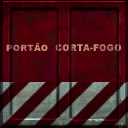
<style>
.page{position:relative;width:128px;height:128px}
.page>*{position:absolute;margin:0}
.t1{font:8.8px "Arial-Black";letter-spacing:0.05em;color:#b8826c;scale:0.97 1}
.t2{font:9.2px "Arial-Black";letter-spacing:0.05em;text-transform:uppercase;scale:0.93 1}
</style>
<div class="page">
<p class="t1" style="left:6px;top:43px;width:42px;height:8px">PORTÃO</p>
<p class="t2" style="left:55px;top:44px;width:66px;height:7px">Corta-fogo</p>
</div>
